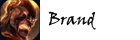
<style>
.page{position:relative;width:140px;height:40px;background:#ffffff}
.page>*{position:absolute;margin:0}
.t1{font:12px "VinerHandITC";color:#000000}
</style>
<div class="page">
<p class="t1" style="left:48px;top:11px;width:48px;height:19px">Brand</p>
</div>
